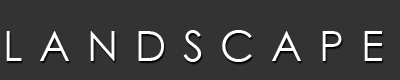
<style>
.page{position:relative;width:400px;height:80px;background:#333333}
.page>*{position:absolute;margin:0}
.t1{font:42px "CenturyGothic";letter-spacing:0.4em;color:#ffffff;text-transform:uppercase}
</style>
<div class="page">
<p class="t1" style="left:6px;top:30px;width:376px;height:32px">Landscape</p>
</div>
